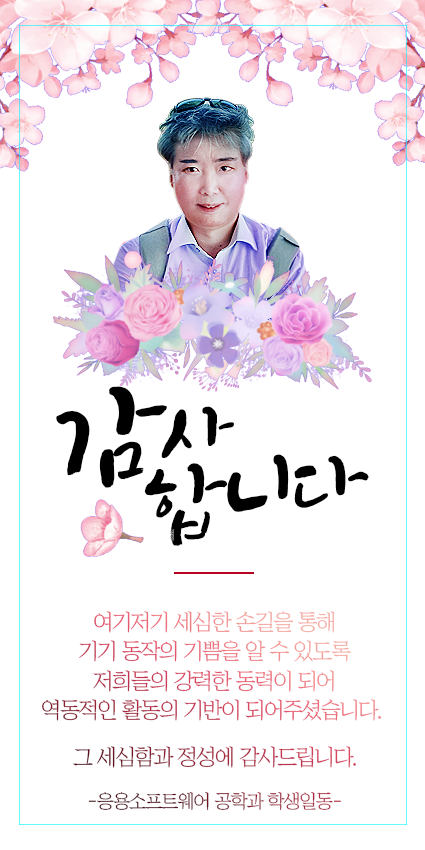
<style>
.page{position:relative;width:425px;height:850px;background:#ffffff}
.page>*{position:absolute;margin:0}
.t1{font:130.2px/79.1px "Makgeolli";letter-spacing:-0.1em;color:#000000}
.t2{font:99.1px/79.1px "Makgeolli";letter-spacing:-0.1em;color:#000000}
.t3{font:99.1px/79.1px "Makgeolli";letter-spacing:-0.08em;color:#000000}
.t4{font:111.2px/79.1px "Makgeolli";letter-spacing:-0.08em;color:#000000}
.t5{font:22.2px/29.6px "ChosunilboNM";letter-spacing:-0.06em}
.t6{font:22.2px/46.1px "ChosunilboNM";letter-spacing:-0.06em}
.t7{font:19px/42.1px "ChosunilboNM";letter-spacing:-0.06em}
</style>
<div class="page">
<p class="t1" style="left:56px;top:386px;width:313px;height:160px;rotate:-6deg">감<span class="t2">사<br>          </span><span class="t3">합</span><span class="t4">니</span><span class="t3">다</span></p>
<p class="t5" style="left:42px;top:611px;width:339px;height:200px;text-align:center">여기저기 세심한 손길을 통해<br>기기 동작의 기쁨을 알 수 있도록<br>저희들의 강력한 동력이 되어<br><span class="t6">역동적인 활동의 기반이 되어주셨습니다. <br>그 세심함과 정성에 감사드립니다.<br></span><span class="t7">-응용소프트웨어 공학과 학생일동-</span></p>
</div>
